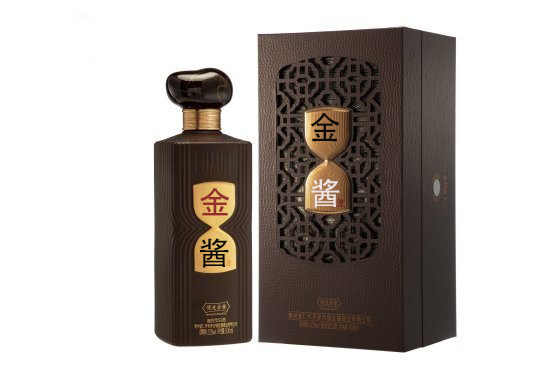
<style>
.page{position:relative;width:560px;height:373px;background:#ffffff}
.page>*{position:absolute;margin:0}
.t1{font:32px "AdobeHeitiStd-Regular";color:#080808}
.t2{font:31.8px "AdobeHeitiStd-Regular";color:#efe4e4}
.t3{font:32px "MS-PGothic";color:#962d2d}
.t4{font:32.2px "AdobeHeitiStd-Regular";color:#070707}
</style>
<div class="page">
<p class="t1" style="left:310px;top:112px;width:30px;height:30px">金</p>
<p class="t2" style="left:311px;top:178px;width:29px;height:30px">酱</p>
<p class="t3" style="left:200px;top:188px;width:30px;height:28px">金</p>
<p class="t4" style="left:200px;top:238px;width:29px;height:30px">酱</p>
</div>
